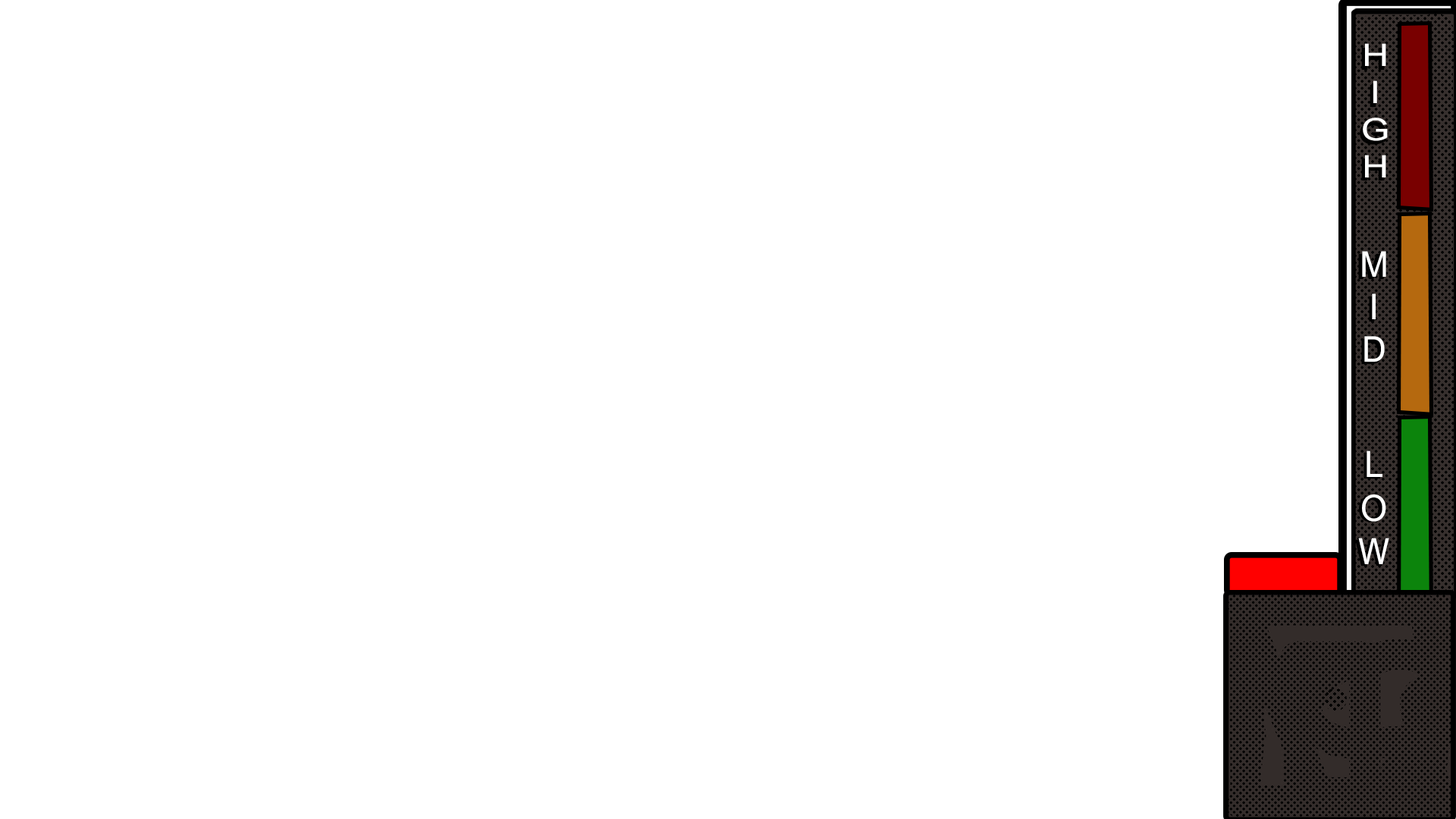
<style>
.page{position:relative;width:1456px;height:819px;background:#ffffff}
.page>*{position:absolute;margin:0}
.t1{font:30.9px "ArialNova";color:#ffffff;scale:1.24 1}
.t2{font:35.5px "ArialNova";color:#ffffff}
.t3{font:36.4px "ArialNova";color:#ffffff;scale:0.95 1}
</style>
<div class="page">
<p class="t1" style="left:1363px;top:43px;width:25px;height:134px;text-align:center">H<br>I<br>G<br>H</p>
<p class="t2" style="left:1362px;top:251px;width:24px;height:111px;text-align:center">M<br>I<br>D</p>
<p class="t3" style="left:1358px;top:450px;width:31px;height:114px;text-align:center">L<br>O<br>W</p>
</div>
